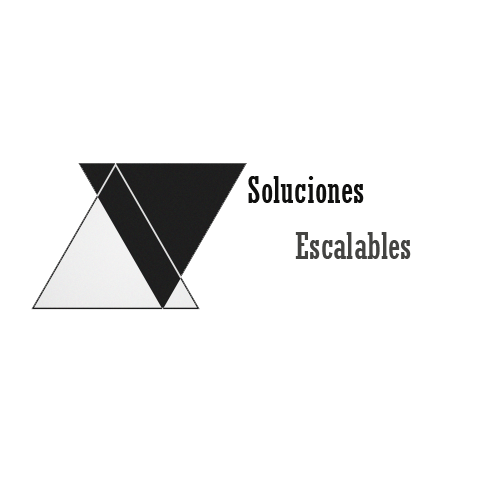
<style>
.page{position:relative;width:500px;height:500px;background:#ffffff}
.page>*{position:absolute;margin:0}
.t1{font:36px "Rockwell-Condensed";color:#0f0f0e}
.t2{font:36px "Rockwell-Condensed";color:#444442}
</style>
<div class="page">
<p class="t1" style="left:248px;top:176px;width:116px;height:27px">Soluciones</p>
<p class="t2" style="left:295px;top:232px;width:116px;height:27px">Escalables</p>
</div>
